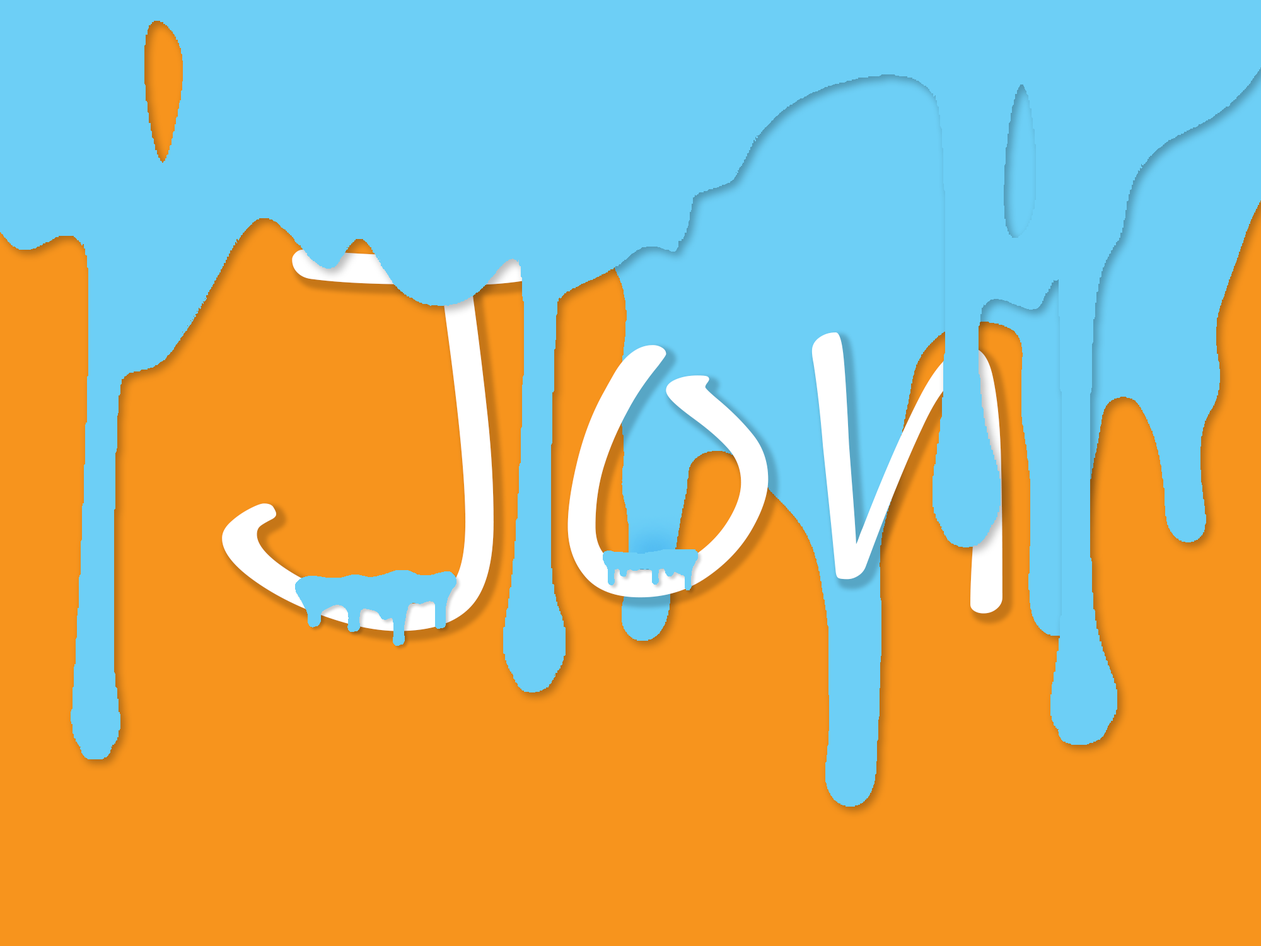
<style>
.page{position:relative;width:1261px;height:946px;background:#f7941d}
.page>*{position:absolute;margin:0}
.t1{font:551.7px "InkFree";color:#ffffff}
</style>
<div class="page">
<p class="t1" style="left:222px;top:221px;width:780px;height:410px">Jon</p>
</div>
